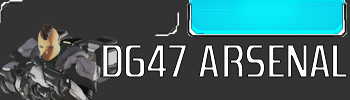
<style>
.page{position:relative;width:350px;height:100px;background:#333333}
.page>*{position:absolute;margin:0}
.t1{font:48px "Zrnic";color:#ffffff}
</style>
<div class="page">
<p class="t1" style="left:102px;top:45px;width:245px;height:32px">D647 ARSENAL</p>
</div>
